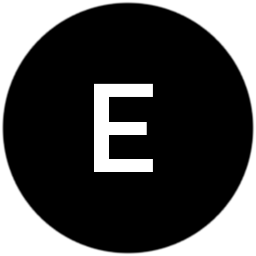
<style>
.page{position:relative;width:256px;height:256px;background:#000000}
.page>*{position:absolute;margin:0}
.t1{font:125px "Purista-SemiBold";color:#ffffff}
</style>
<div class="page">
<p class="t1" style="left:94px;top:83px;width:59px;height:89px">E</p>
</div>
